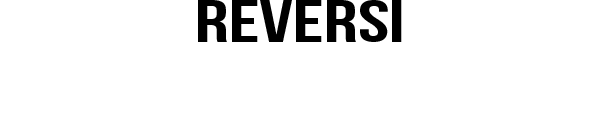
<style>
.page{position:relative;width:600px;height:134px;background:#ffffff}
.page>*{position:absolute;margin:0}
.t1{font:60px "BebasNeue";color:#000000;scale:1.4 1}
.t2{font:60px "BebasNeue";color:#ffffff;scale:1.4 1}
</style>
<div class="page">
<p class="t1" style="left:198px;top:0px;width:204px;height:114px;text-align:center">reversi<br><span class="t2">rules</span></p>
</div>
